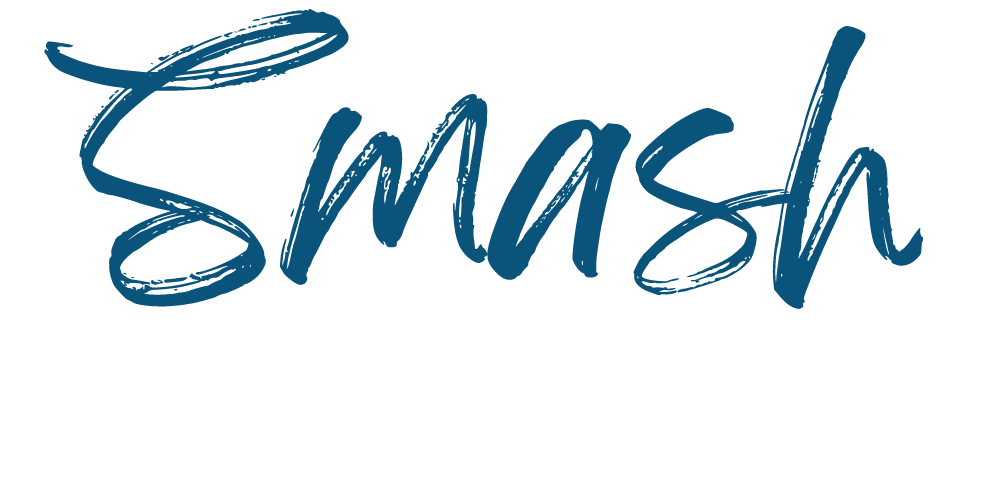
<style>
.page{position:relative;width:1000px;height:500px;background:#ffffff}
.page>*{position:absolute;margin:0}
.t1{font:269.7px "FeelingPassionate-Regular";color:#0a537b}
</style>
<div class="page">
<p class="t1" style="left:44px;top:9px;width:879px;height:300px">Smash</p>
</div>
